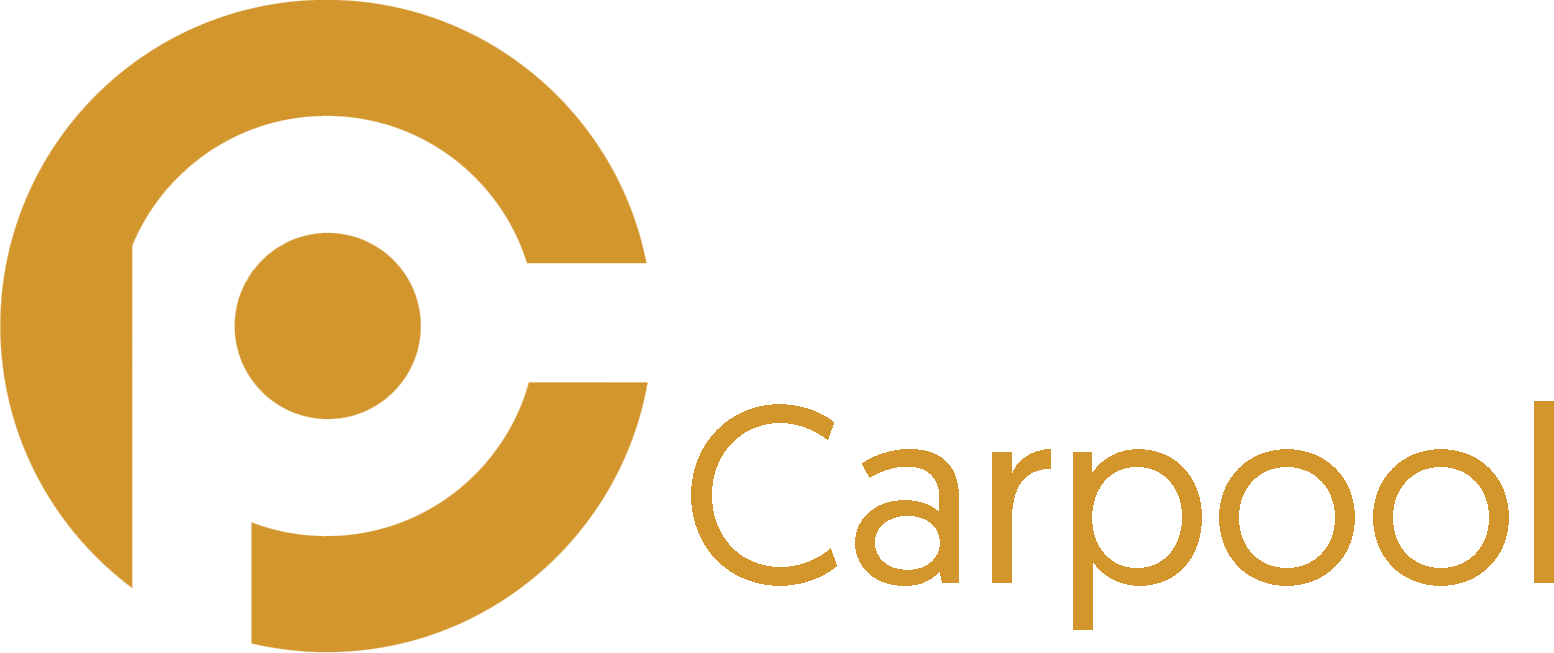
<style>
.page{position:relative;width:1554px;height:653px;background:#ffffff}
.page>*{position:absolute;margin:0}
.t1{font:252px "Geomanist";color:#d3962c}
</style>
<div class="page">
<p class="t1" style="left:691px;top:401px;width:863px;height:229px">Carpool</p>
</div>
